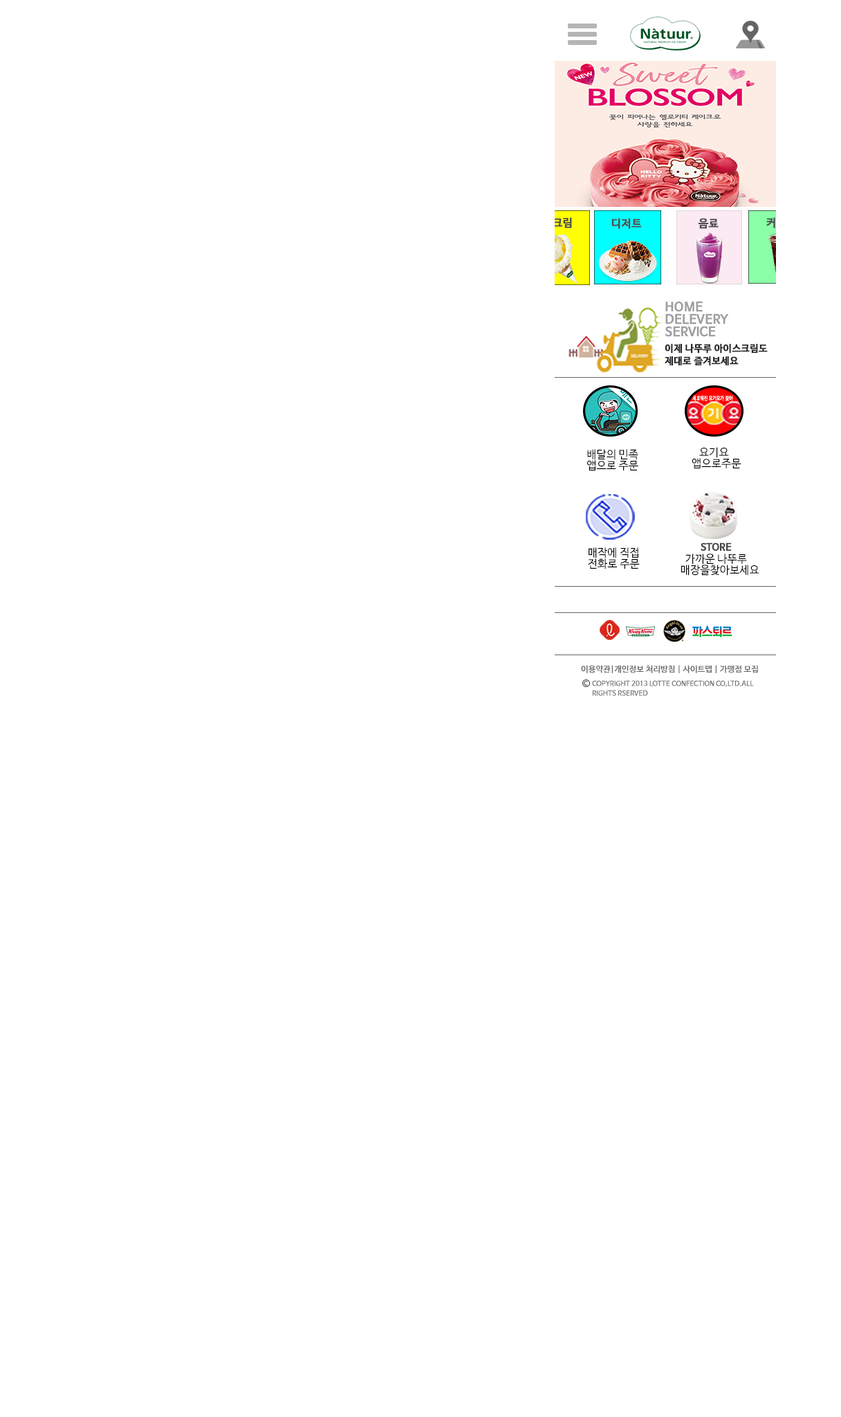
<style>
.page{position:relative;width:841px;height:1417px;background:#ffffff}
.page>*{position:absolute;margin:0}
.t1{font:11.1px "NanumBarunGothicBold";font-weight:bold}
.t2{font:11.1px "NanumBarunGothicBold";color:#4e4e4e;font-weight:bold}
.t3{font:12.5px/12.5px "NanumBarunGothicBold";color:#a09f9f;font-weight:bold}
.t4{font:9.7px/12.5px "NanumBarunGothicBold";color:#282828;font-weight:bold}
.t5{font:5.5px "NanumBarunGothicBold";color:#ffffff;font-weight:bold;scale:0.75 1}
.t6{font:11.1px/11.1px "NanumBarunGothic";color:#000000}
.t7{font:9.7px "NanumBarunGothicBold";color:#424242;font-weight:bold}
.t8{font:8.3px "NanumBarunGothicBold";color:#686868}
.t9{font:6.9px/9.7px "NanumBarunGothicBold";color:#686868}
</style>
<div class="page">
<p class="t1" style="left:522px;top:217px;width:50px;height:11px">아이스크림</p>
<p class="t2" style="left:612px;top:218px;width:30px;height:11px">디저트</p>
<p class="t2" style="left:698px;top:218px;width:21px;height:11px">음료</p>
<p class="t1" style="left:767px;top:217px;width:19px;height:11px">커피</p>
<p class="t3" style="left:666px;top:301px;width:63px;height:36px">HOME DELEVERY<br>SERVICE</p>
<p class="t4" style="left:665px;top:344px;width:103px;height:22px">이제 나뚜루 아이스크림도 제대로 즐겨보세요</p>
<p class="t5" style="left:693px;top:395px;width:40px;height:6px">새로워진 요기요가 찾아</p>
<p class="t6" style="left:587px;top:449px;width:52px;height:22px">배달의 민족<br>  앱으로 주문</p>
<p class="t6" style="left:692px;top:447px;width:50px;height:21px">요기요 <br>앱으로주문</p>
<p class="t7" style="left:701px;top:543px;width:31px;height:8px">STORE</p>
<p class="t6" style="left:588px;top:547px;width:52px;height:22px">매작에 직접<br>   전화로 주문</p>
<p class="t6" style="left:682px;top:554px;width:78px;height:22px">가까운 나뚜루 매장을찾아보세요</p>
<p class="t8" style="left:581px;top:665px;width:177px;height:8px">이용약관|개인정보 처리방침 | 사이트맵 | 가맹점 모집</p>
<p class="t9" style="left:592px;top:680px;width:162px;height:16px">COPYRIGHT 2013 LOTTE CONFECTION CO,LTD.ALL RIGHTS RSERVED</p>
</div>
